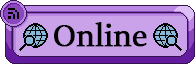
<style>
.page{position:relative;width:195px;height:64px;background:#caa2ea}
.page>*{position:absolute;margin:0}
.t1{font:35.2px "SitkaBanner";color:#000000;font-weight:bold}
</style>
<div class="page">
<p class="t1" style="left:54px;top:22px;width:93px;height:25px">Online</p>
</div>
